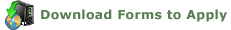
<style>
.page{position:relative;width:231px;height:30px;background:#ffffff}
.page>*{position:absolute;margin:0}
.t1{font:12.5px "Verdana-Bold";letter-spacing:0.025em;color:#587d52}
</style>
<div class="page">
<p class="t1" style="left:41px;top:9px;width:186px;height:13px">Download Forms to Apply</p>
</div>
